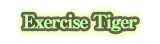
<style>
.page{position:relative;width:160px;height:44px;background:#ffffff}
.page>*{position:absolute;margin:0}
.t1{font:18px "RyuminPro-ExBold";letter-spacing:-0.08em;color:#c6ffad;font-weight:bold}
</style>
<div class="page">
<p class="t1" style="left:23px;top:14px;width:114px;height:18px">Exercise Tiger</p>
</div>
